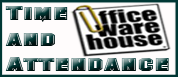
<style>
.page{position:relative;width:178px;height:77px;background:#fffcfc}
.page>*{position:absolute;margin:0}
.t1{font:17.7px/25.8px "SFCollegiate";scale:1.72 1}
</style>
<div class="page">
<p class="t1" style="left:5px;top:6px;width:164px;height:65px">Time<br>and <br>Attendance</p>
</div>
